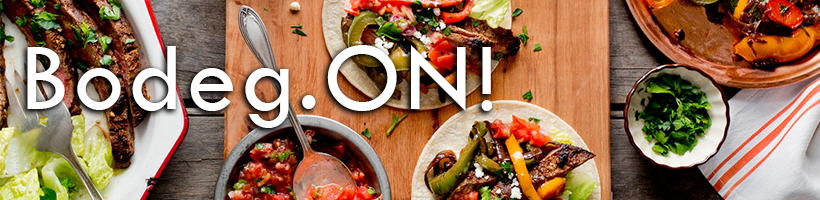
<style>
.page{position:relative;width:820px;height:200px}
.page>*{position:absolute;margin:0}
.t1{font:100px "TwCenMT-Regular";letter-spacing:0.04em;color:#ffffff}
</style>
<div class="page">
<p class="t1" style="left:27px;top:45px;width:466px;height:83px">Bodeg.ON!</p>
</div>
